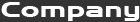
<style>
.page{position:relative;width:140px;height:22px;background:#333333}
.page>*{position:absolute;margin:0}
.t1{font:21px "HanzelExtendedNormal";color:#ffffff}
</style>
<div class="page">
<p class="t1" style="left:1px;top:2px;width:139px;height:19px">Company</p>
</div>
